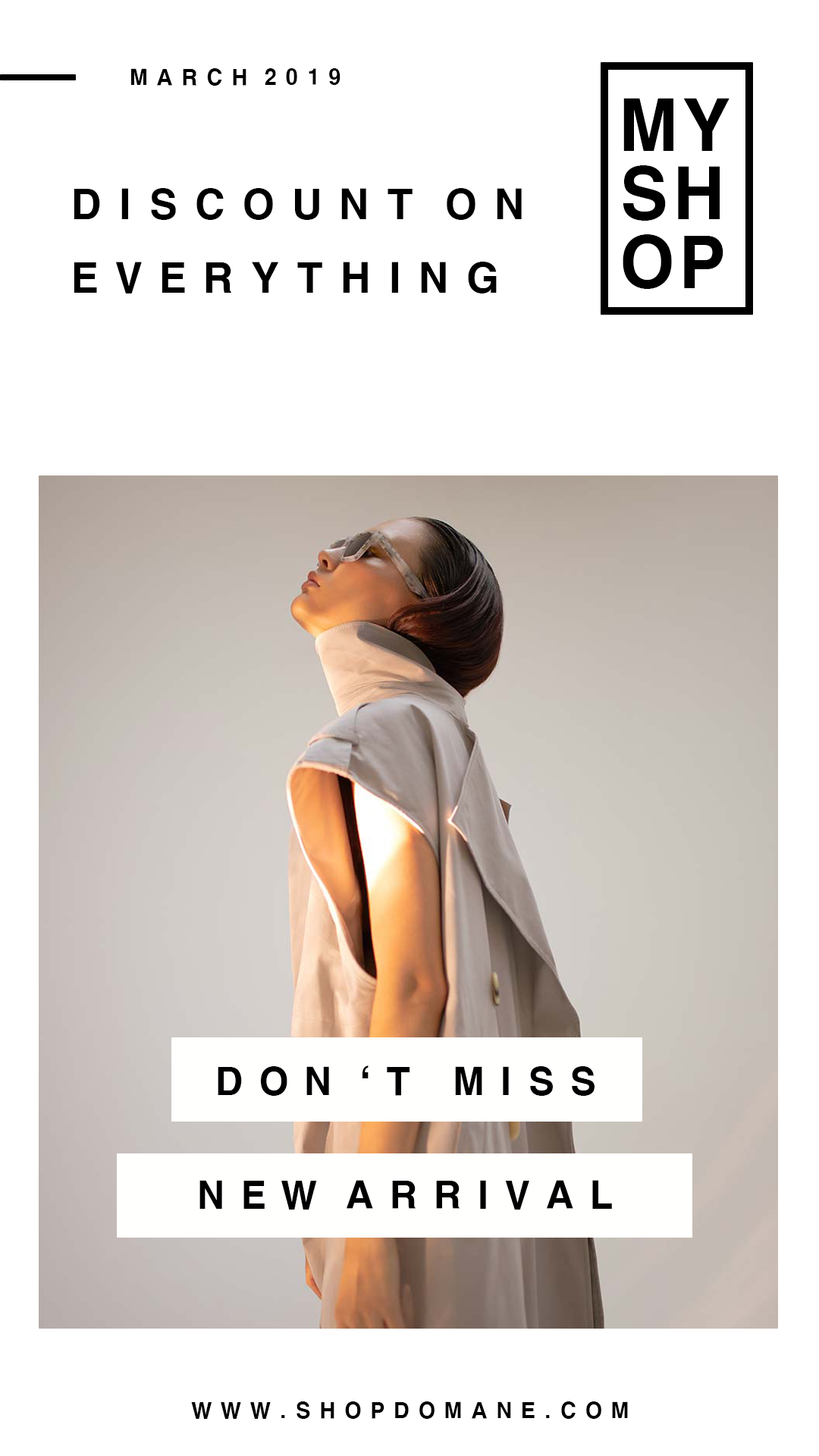
<style>
.page{position:relative;width:819px;height:1456px;background:#ffffff}
.page>*{position:absolute;margin:0}
.t1{font:21.1px "H2gtrE";letter-spacing:0.03em;color:#000000}
.t2{font:68.5px/68.5px "H2gtrE";letter-spacing:0.03em;color:#000000}
.t3{font:40px/73.7px "H2gtrE";letter-spacing:0.03em;color:#000000}
.t4{font:36.9px "H2gtrE";letter-spacing:0.03em;color:#000000}
</style>
<div class="page">
<p class="t1" style="left:131px;top:68px;width:209px;height:18px">M A R C H  2 0 1 9</p>
<p class="t2" style="left:623px;top:98px;width:107px;height:191px">MY<br>SH<br>OP</p>
<p class="t3" style="left:74px;top:188px;width:448px;height:105px">D I S C O U N T  O N<br>E V E R Y T H I N G</p>
<p class="t4" style="left:218px;top:1065px;width:377px;height:31px">D O N‘ T   M I S S</p>
<p class="t4" style="left:199px;top:1180px;width:413px;height:30px">N E W  A R R I V A L</p>
<p class="t1" style="left:191px;top:1401px;width:437px;height:18px">W W W . S H O P D O M A N E . C O M</p>
</div>
